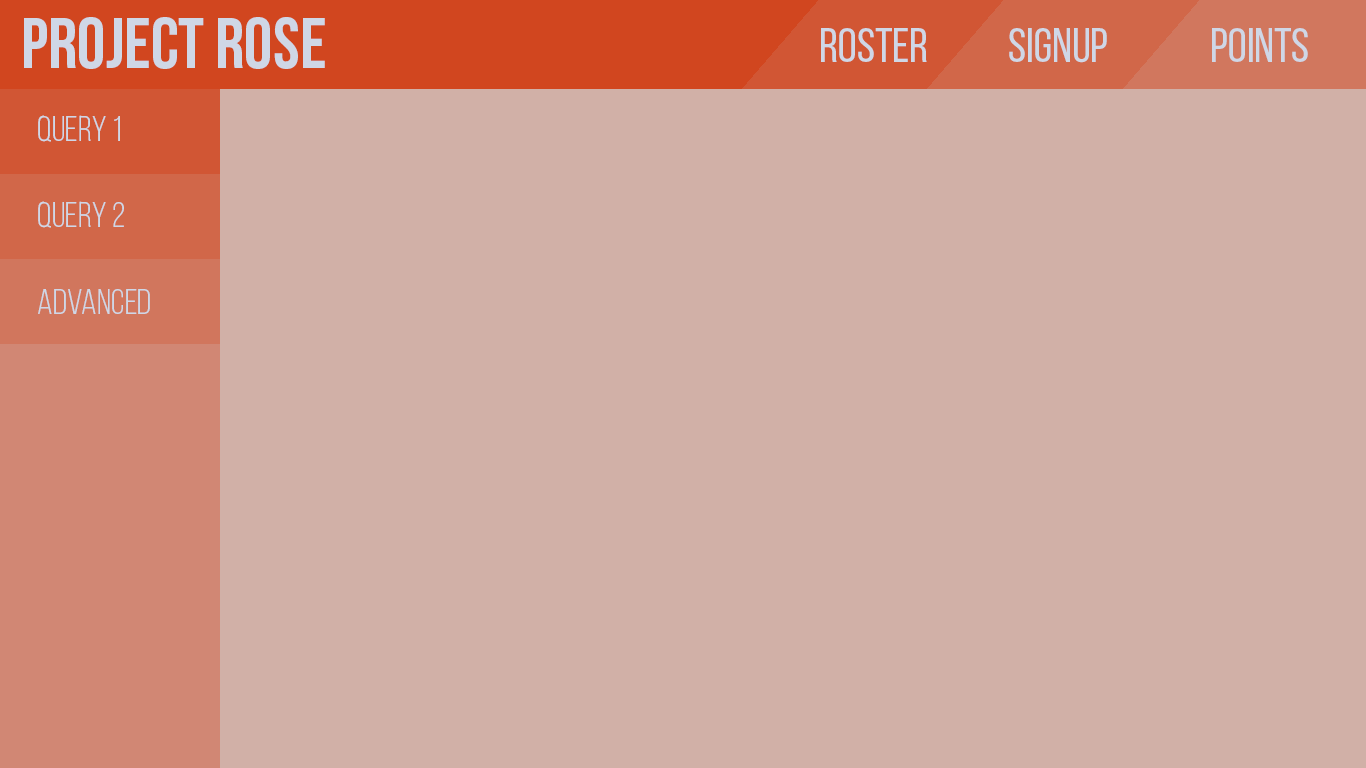
<style>
.page{position:relative;width:1366px;height:768px;background:#d1b0a7}
.page>*{position:absolute;margin:0}
.t1{font:72px "BebasNeueBold";color:#cfd7e6}
.t2{font:48px "BebasNeueRegular";color:#cfd7e6}
.t3{font:36px "BebasNeueBook";color:#cfd7e6}
</style>
<div class="page">
<p class="t1" style="left:24px;top:17px;width:301px;height:52px">Project Rose</p>
<p class="t2" style="left:821px;top:28px;width:106px;height:34px">Roster</p>
<p class="t2" style="left:1009px;top:28px;width:98px;height:35px">Signup</p>
<p class="t2" style="left:1212px;top:28px;width:96px;height:34px">Points</p>
<p class="t3" style="left:38px;top:115px;width:112px;height:199px">Query 1<br><br>Query 2<br><br>Advanced</p>
</div>
